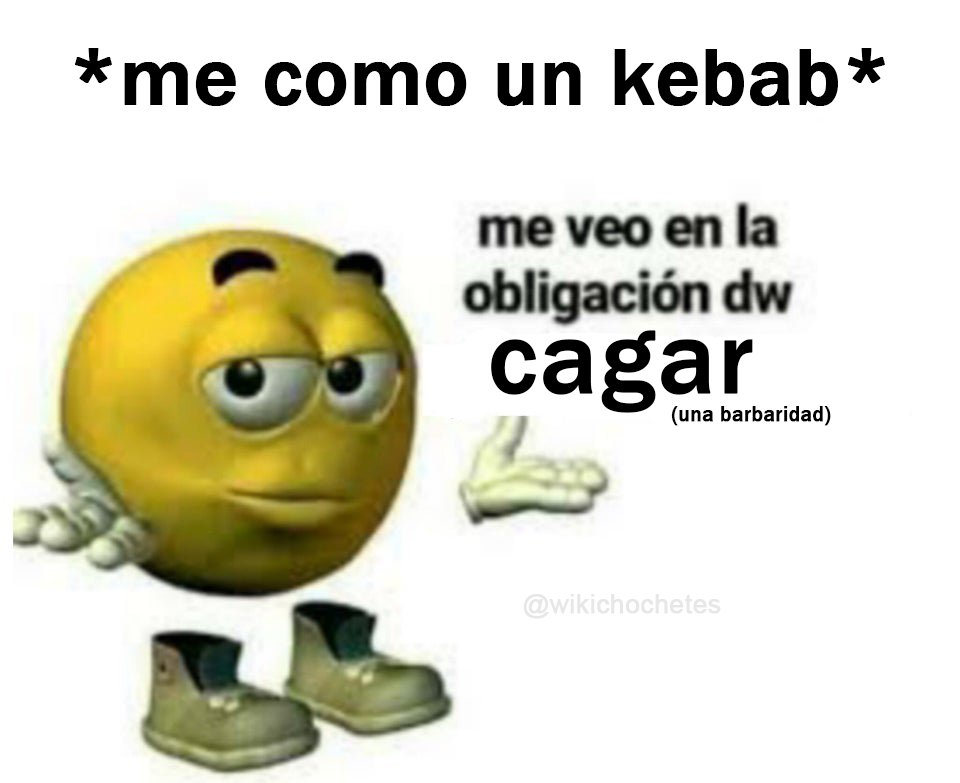
<style>
.page{position:relative;width:960px;height:783px;background:#ffffff}
.page>*{position:absolute;margin:0}
.t1{font:83px "FranklinGothic-Medium";color:#000000;font-weight:bold}
.t2{font:106.1px "FranklinGothic-Medium";color:#000000;font-weight:bold}
.t3{font:21.1px "FranklinGothic-Medium";color:#000000;font-weight:bold}
.t4{font:26.1px "ArialMT";color:#e7e7e7;font-weight:bold}
</style>
<div class="page">
<p class="t1" style="left:75px;top:48px;width:810px;height:58px">*me como un kebab*</p>
<p class="t2" style="left:491px;top:330px;width:262px;height:83px">cagar</p>
<p class="t3" style="left:671px;top:406px;width:160px;height:20px">(una barbaridad)</p>
<p class="t4" style="left:523px;top:594px;width:198px;height:25px">@wikichochetes</p>
</div>
